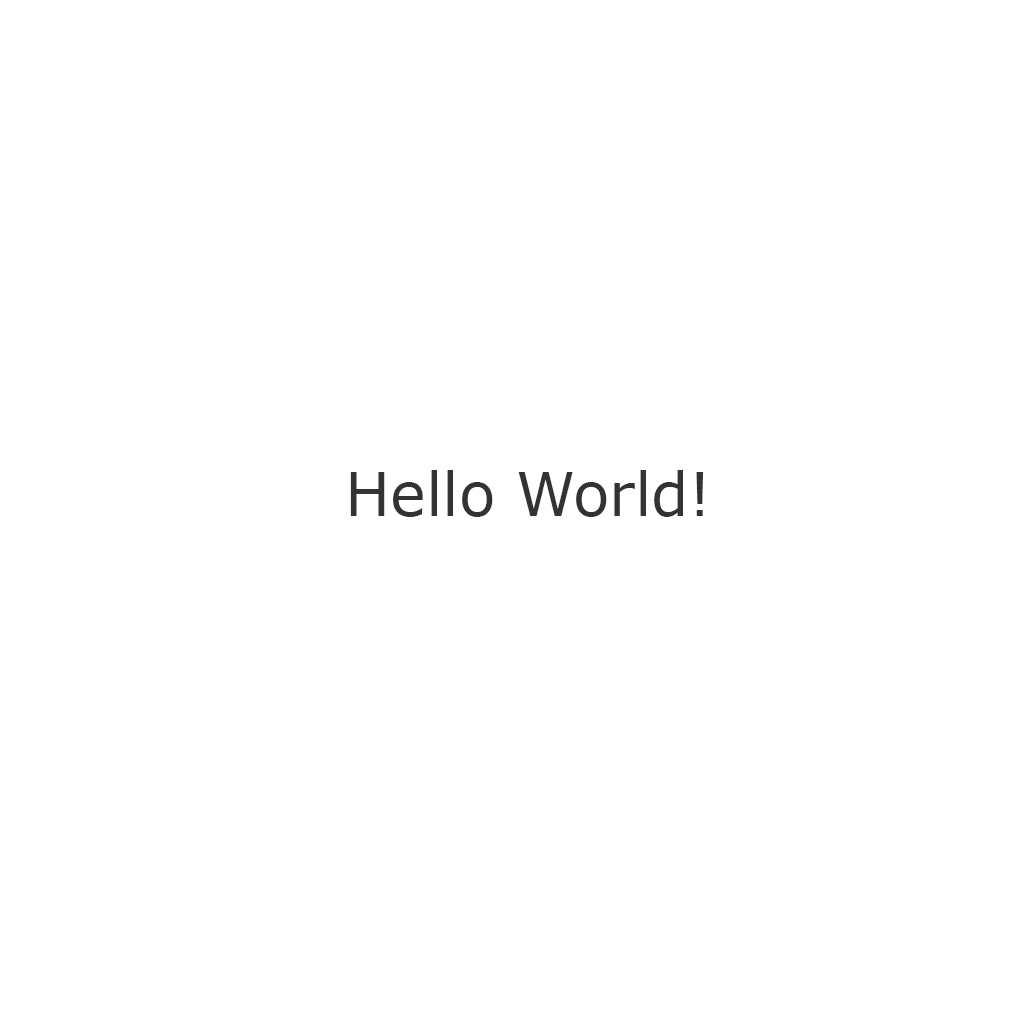
<style>
.page{position:relative;width:1024px;height:1024px;background:#ffffff}
.page>*{position:absolute;margin:0}
.t1{font:60px "Verdana";color:#333333}
</style>
<div class="page">
<p class="t1" style="left:350px;top:470px;width:354px;height:47px">Hello World!</p>
</div>
